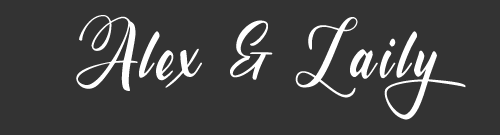
<style>
.page{position:relative;width:500px;height:135px;background:#333333}
.page>*{position:absolute;margin:0}
.t1{font:72px "Cavyenta";letter-spacing:0.07em;color:#ffffff}
</style>
<div class="page">
<p class="t1" style="left:76px;top:15px;width:390px;height:105px">Alex &amp; Laily</p>
</div>
